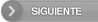
<style>
.page{position:relative;width:98px;height:22px;background:#9c9c9c}
.page>*{position:absolute;margin:0}
.t1{font:10px "Helvetica-Bold";letter-spacing:-0.04em;color:#ffffff;text-transform:uppercase}
</style>
<div class="page">
<p class="t1" style="left:31px;top:7px;width:51px;height:8px">siguiente</p>
</div>
